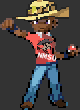
<style>
.page{position:relative;width:80px;height:110px;background:#333333}
.page>*{position:absolute;margin:0}
.t1{font:8px "LucidaConsole";color:#ffffff}
</style>
<div class="page">
<p class="t1" style="left:37px;top:52px;width:20px;height:9px;rotate:13deg">NMSU</p>
</div>
